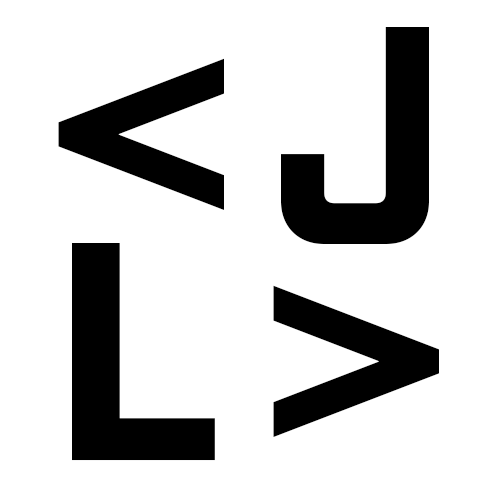
<style>
.page{position:relative;width:500px;height:500px;background:#ffffff}
.page>*{position:absolute;margin:0}
.t1{font:300px "IndustryInc-Base";color:#000000}
.t2{font:300px "AzoSans-Bold";color:#000000}
</style>
<div class="page">
<p class="t1" style="left:281px;top:27px;width:148px;height:217px">J</p>
<p class="t2" style="left:58px;top:58px;width:166px;height:152px">&lt;</p>
<p class="t2" style="left:72px;top:243px;width:143px;height:218px">L</p>
<p class="t2" style="left:273px;top:285px;width:166px;height:152px">&gt;</p>
</div>
